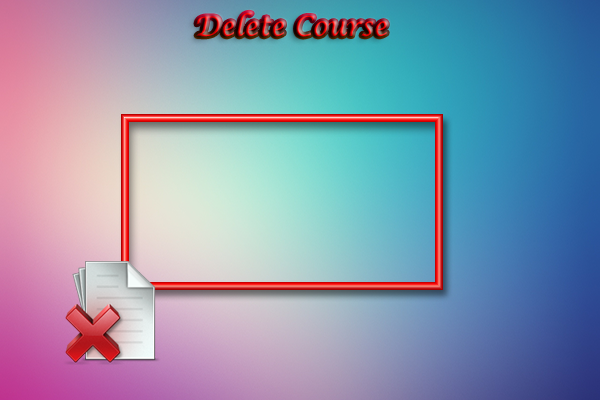
<style>
.page{position:relative;width:600px;height:400px}
.page>*{position:absolute;margin:0}
.t1{font:26.7px "LucidaCalligraphy-Italic"}
</style>
<div class="page">
<p class="t1" style="left:196px;top:12px;width:191px;height:25px">Delete Course</p>
</div>
